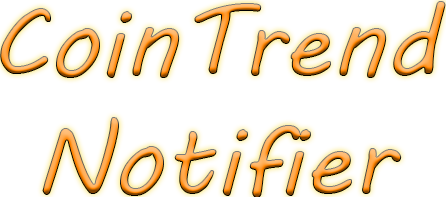
<style>
.page{position:relative;width:446px;height:197px;background:#ffffff}
.page>*{position:absolute;margin:0}
.t1{font:98px "MVBoli"}
</style>
<div class="page">
<p class="t1" style="left:0px;top:1px;width:446px;height:197px;text-align:center">CoinTrend Notifier</p>
</div>
